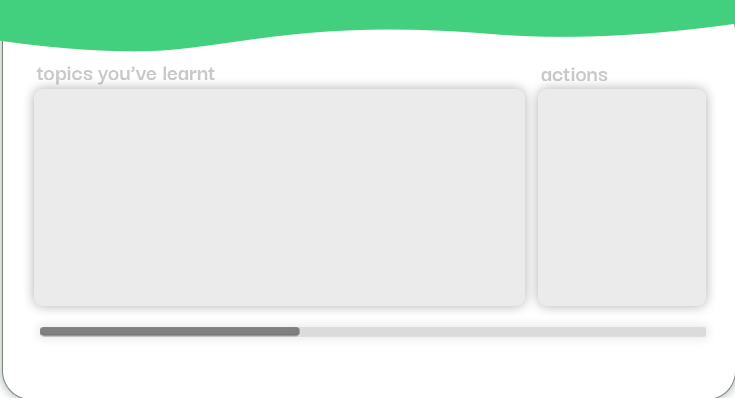
<style>
.page{position:relative;width:735px;height:398px;background:#ebebeb}
.page>*{position:absolute;margin:0}
.t1{font:24px "DarkerGrotesque-Bold";color:#c9c9c9}
</style>
<div class="page">
<p class="t1" style="left:36px;top:66px;width:179px;height:19px">topics you’ve learnt</p>
<p class="t1" style="left:541px;top:67px;width:67px;height:14px">actions</p>
</div>
